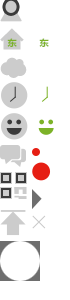
<style>
.page{position:relative;width:70px;height:300px;background:#ffffff}
.page>*{position:absolute;margin:0}
.t1{font:9.3px "MicrosoftYaHei-Bold";color:#7cb228}
</style>
<div class="page">
<p class="t1" style="left:7px;top:38px;width:10px;height:9px">东</p>
<p class="t1" style="left:39px;top:38px;width:10px;height:9px">东</p>
</div>
